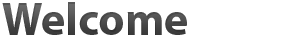
<style>
.page{position:relative;width:300px;height:47px;background:#ffffff}
.page>*{position:absolute;margin:0}
.t1{font:46px "MyriadPro-Bold";color:#464646}
</style>
<div class="page">
<p class="t1" style="left:2px;top:2px;width:185px;height:33px">Welcome</p>
</div>
